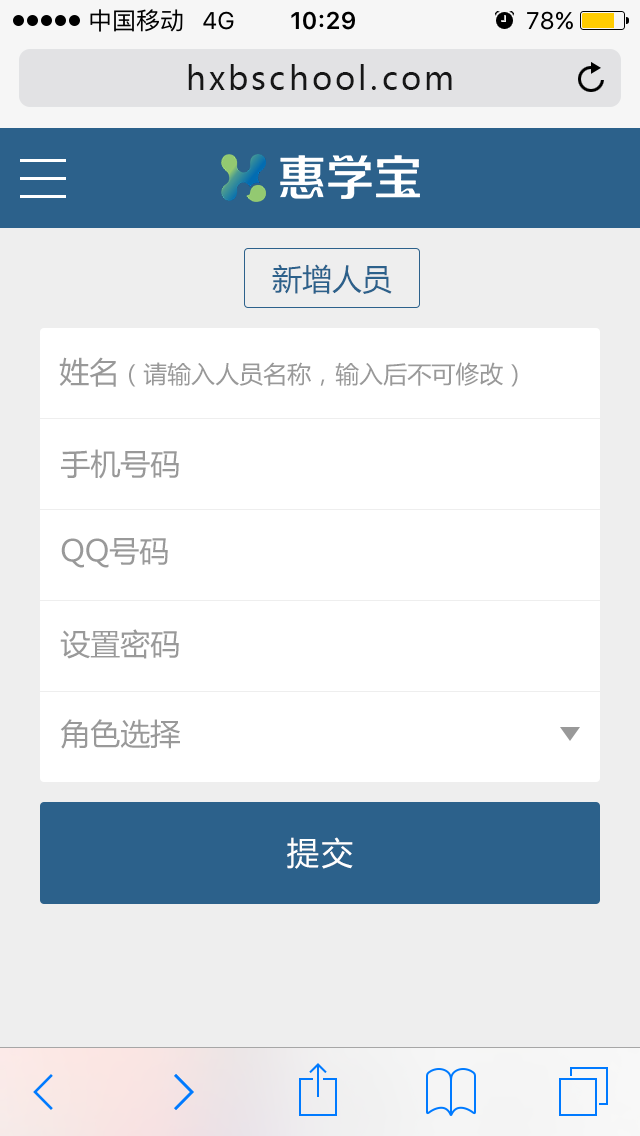
<style>
.page{position:relative;width:640px;height:1136px;background:#ffffff}
.page>*{position:absolute;margin:0}
.t1{font:32px "MicrosoftYaHei";letter-spacing:0.1em;color:#171717}
.t2{font:30px "MicrosoftYaHei";color:#2c618b}
.t3{font:24px "MicrosoftYaHei";color:#999999}
.t4{font:30px "MicrosoftYaHei";color:#999999}
.t5{font:32px "MicrosoftYaHei";letter-spacing:0.075em;color:#ffffff}
</style>
<div class="page">
<p class="t1" style="left:188px;top:64px;width:264px;height:26px">hxbschool.com</p>
<p class="t2" style="left:272px;top:264px;width:120px;height:30px">新增人员</p>
<p class="t3" style="left:59px;top:357px;width:459px;height:30px"><span class="t4">姓名</span>（请输入人员名称，输入后不可修改）</p>
<p class="t4" style="left:61px;top:449px;width:118px;height:30px">手机号码</p>
<p class="t4" style="left:61px;top:538px;width:107px;height:30px">QQ号码</p>
<p class="t4" style="left:60px;top:629px;width:119px;height:30px">设置密码</p>
<p class="t4" style="left:60px;top:719px;width:120px;height:30px">角色选择</p>
<p class="t5" style="left:287px;top:837px;width:66px;height:32px">提交</p>
</div>
